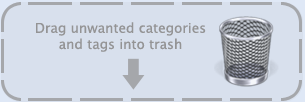
<style>
.page{position:relative;width:305px;height:102px;background:#d8e0ed}
.page>*{position:absolute;margin:0}
.t1{font:13.5px "LucidaSans";color:#949495}
</style>
<div class="page">
<p class="t1" style="left:36px;top:22px;width:170px;height:30px;text-align:center">Drag unwanted categories<br>and tags into trash</p>
</div>
